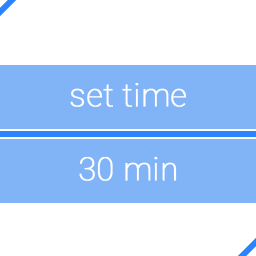
<style>
.page{position:relative;width:256px;height:256px;background:#ffffff}
.page>*{position:absolute;margin:0}
.t1{font:32px "Roboto-Thin";color:#ffffff;font-weight:bold}
</style>
<div class="page">
<p class="t1" style="left:70px;top:82px;width:117px;height:25px">set time</p>
<p class="t1" style="left:79px;top:156px;width:98px;height:25px">30 min</p>
</div>
